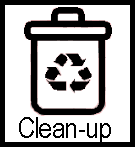
<style>
.page{position:relative;width:135px;height:147px;background:#ffffff}
.page>*{position:absolute;margin:0}
.t1{font:28.9px "ArialNarrow";letter-spacing:-0.005em;color:#000000}
</style>
<div class="page">
<p class="t1" style="left:19px;top:117px;width:92px;height:27px">Clean-up</p>
</div>
